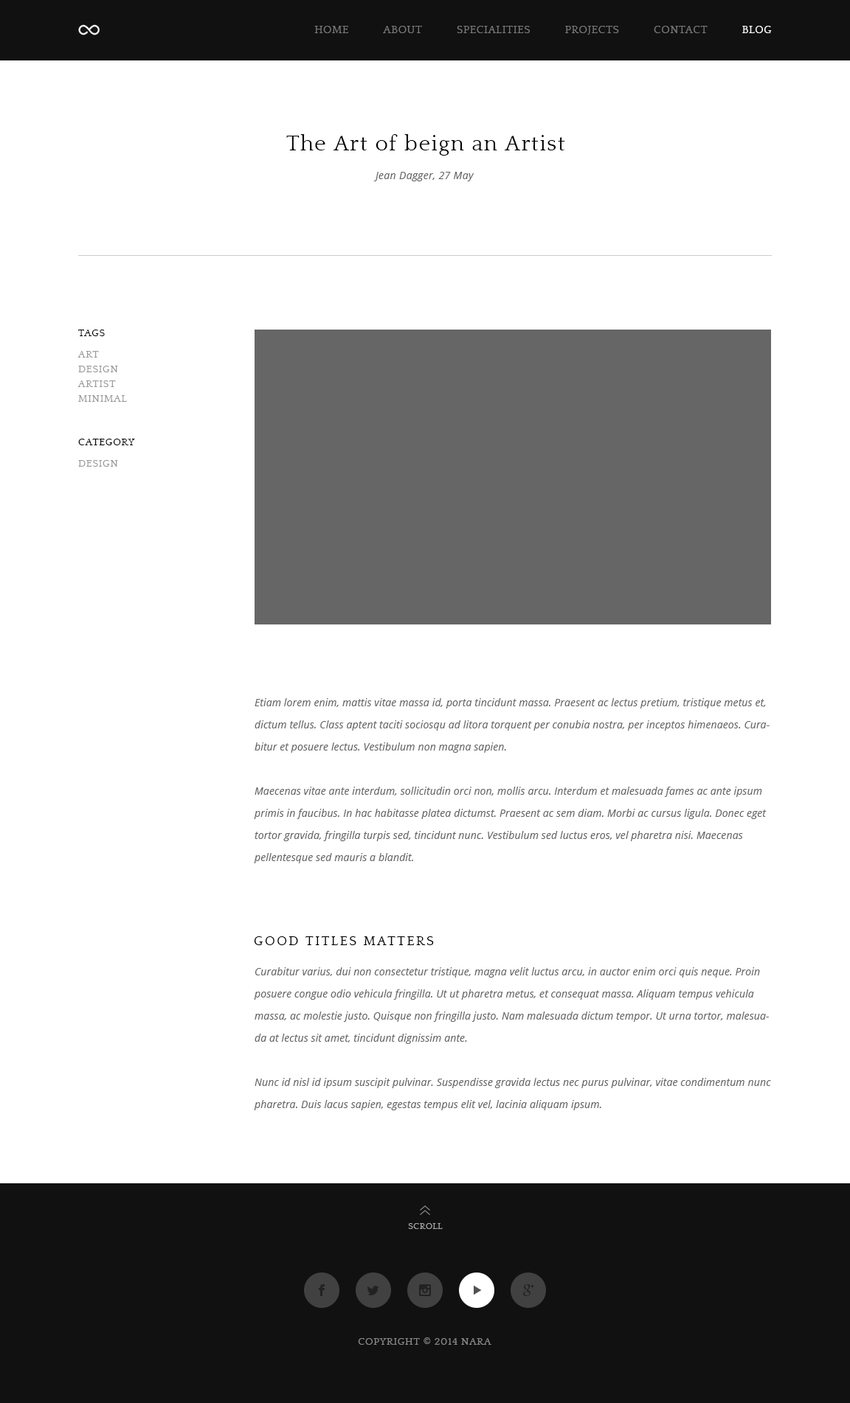
<style>
.page{position:relative;width:850px;height:1403px;background:#ffffff}
.page>*{position:absolute;margin:0}
.t1{font:11.1px "Quattrocento";letter-spacing:0.04em;color:#777777;text-transform:uppercase}
.t2{font:11.1px "Quattrocento";letter-spacing:0.04em;color:#ffffff;text-transform:uppercase}
.t3{font:22.1px "Quattrocento";letter-spacing:0.05em;color:#000000}
.t4{font:10.3px "OpenSans-Italic";letter-spacing:0.025em;color:#666666}
.t5{font:10.3px "Quattrocento";letter-spacing:0.05em;color:#000000;text-transform:uppercase}
.t6{font:10.3px/14.8px "Quattrocento";letter-spacing:0.05em;color:#999999;text-transform:uppercase}
.t7{font:10.3px "Quattrocento";letter-spacing:0.05em;color:#999999;text-transform:uppercase}
.t8{font:10.3px/22.1px "OpenSans-Italic";letter-spacing:0.01em;color:#666666}
.t9{font:13.3px "Quattrocento";letter-spacing:0.14em;color:#000000;text-transform:uppercase}
.t10{font:8.9px "Quattrocento";letter-spacing:0.05em;color:#a6a6a6;text-transform:uppercase}
.t11{font:10.3px "Quattrocento";letter-spacing:0.05em;color:#888888;text-transform:uppercase}
</style>
<div class="page">
<p class="t1" style="left:314px;top:26px;width:457px;height:9px">HOME           ABOUT           SPECIALITIES           PROJECTS           CONTACT           <span class="t2">BLOG</span></p>
<p class="t3" style="left:286px;top:134px;width:279px;height:22px">The Art of beign an Artist</p>
<p class="t4" style="left:373px;top:172px;width:101px;height:9px">Jean Dagger, 27 May</p>
<p class="t5" style="left:78px;top:330px;width:27px;height:6px">TAGS</p>
<p class="t6" style="left:77px;top:351px;width:50px;height:51px">ART<br>DESIGN<br>ARTIST<br>MINIMAL</p>
<p class="t5" style="left:78px;top:439px;width:57px;height:6px">CATEGORY</p>
<p class="t7" style="left:78px;top:460px;width:40px;height:7px">DESIGN</p>
<p class="t8" style="left:254px;top:698px;width:515px;height:166px">Etiam lorem enim, mattis vitae massa id, porta tincidunt massa. Praesent ac lectus pretium, tristique metus et, dictum tellus. Class aptent taciti sociosqu ad litora torquent per conubia nostra, per inceptos himenaeos. Curabitur et posuere lectus. Vestibulum non magna sapien.<br><br>Maecenas vitae ante interdum, sollicitudin orci non, mollis arcu. Interdum et malesuada fames ac ante ipsum primis in faucibus. In hac habitasse platea dictumst. Praesent ac sem diam. Morbi ac cursus ligula. Donec eget tortor gravida, fringilla turpis sed, tincidunt nunc. Vestibulum sed luctus eros, vel pharetra nisi. Maecenas pellentesque sed mauris a blandit.</p>
<p class="t9" style="left:254px;top:937px;width:180px;height:8px">good titleS matters</p>
<p class="t8" style="left:254px;top:968px;width:517px;height:143px">Curabitur varius, dui non consectetur tristique, magna velit luctus arcu, in auctor enim orci quis neque. Proin posuere congue odio vehicula fringilla. Ut ut pharetra metus, et consequat massa. Aliquam tempus vehicula massa, ac molestie justo. Quisque non fringilla justo. Nam malesuada dictum tempor. Ut urna tortor, malesuada at lectus sit amet, tincidunt dignissim ante.<br><br>Nunc id nisl id ipsum suscipit pulvinar. Suspendisse gravida lectus nec purus pulvinar, vitae condimentum nunc pharetra. Duis lacus sapien, egestas tempus elit vel, lacinia aliquam ipsum.</p>
<p class="t10" style="left:408px;top:1224px;width:35px;height:5px">SCROLL</p>
<p class="t11" style="left:358px;top:1338px;width:133px;height:7px">Copyright © 2014 NARA</p>
</div>
